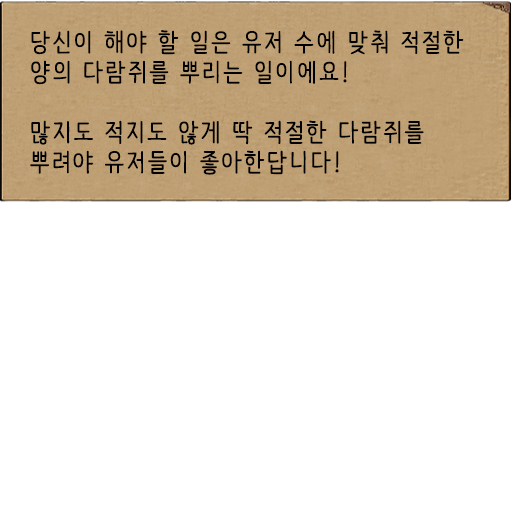
<style>
.page{position:relative;width:512px;height:512px;background:#ffffff}
.page>*{position:absolute;margin:0}
.t1{font:25px "NanumBarunpen";letter-spacing:0.075em;color:#000000;font-weight:bold}
</style>
<div class="page">
<p class="t1" style="left:30px;top:30px;width:434px;height:145px">당신이 해야 할 일은 유저 수에 맞춰 적절한 양의 다람쥐를 뿌리는 일이에요!<br><br>많지도 적지도 않게 딱 적절한 다람쥐를 뿌려야 유저들이 좋아한답니다!</p>
</div>
